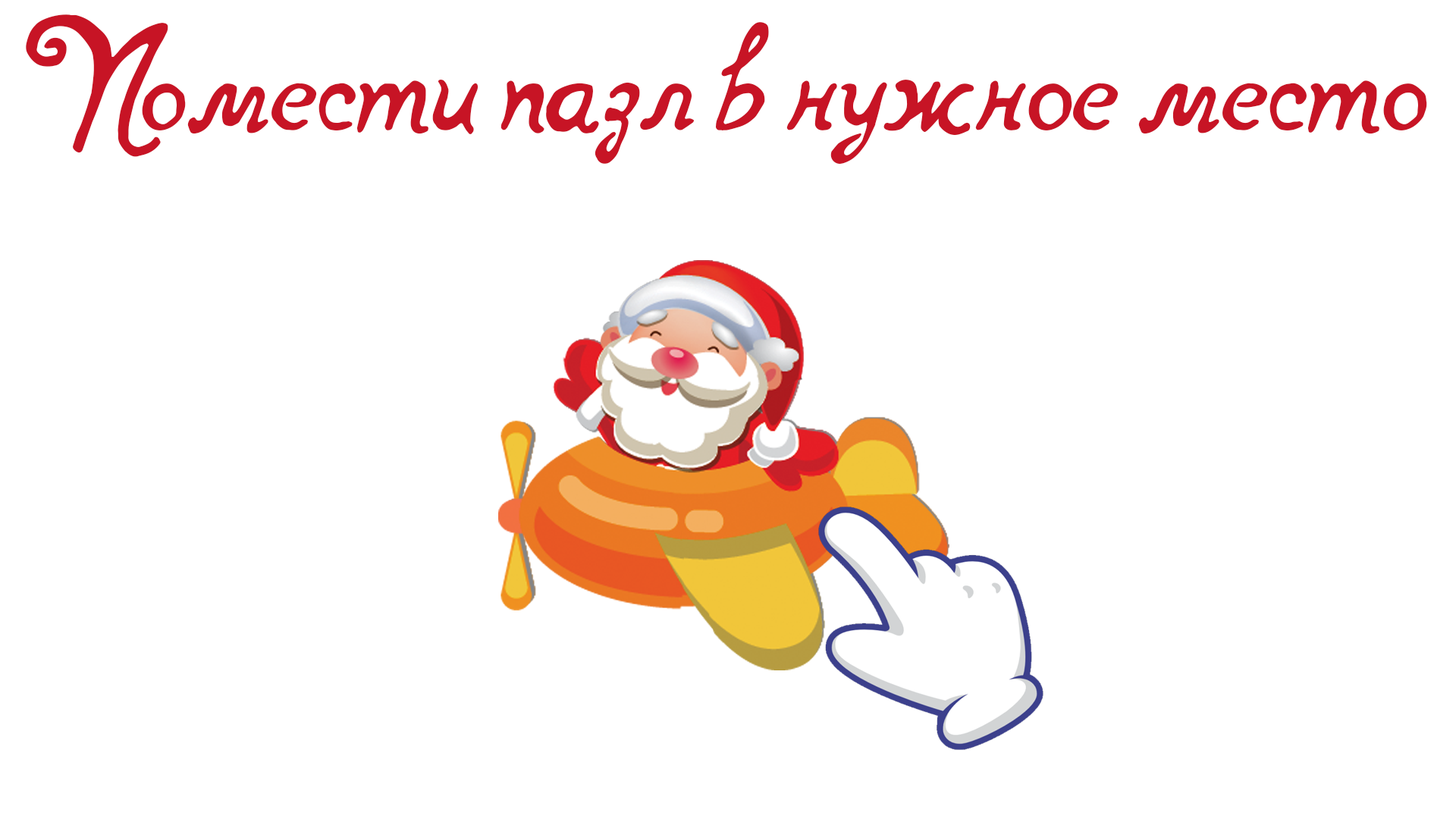
<style>
.page{position:relative;width:1456px;height:819px;background:#ffffff}
.page>*{position:absolute;margin:0}
.t1{font:134.4px "notperfectregular";color:#c71425}
</style>
<div class="page">
<p class="t1" style="left:26px;top:14px;width:1401px;height:150px">Помести пазл в нужное место</p>
</div>
